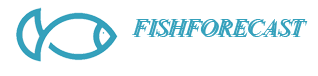
<style>
.page{position:relative;width:318px;height:76px;background:#ffffff}
.page>*{position:absolute;margin:0}
.t1{font:30px "Vijaya";color:#35a1bc}
</style>
<div class="page">
<p class="t1" style="left:132px;top:19px;width:174px;height:16px">FISHFORECAST</p>
<p class="t1" style="left:134px;top:21px;width:174px;height:16px">FISHFORECAST</p>
</div>
